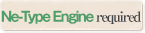
<style>
.page{position:relative;width:145px;height:33px;background:#f0e4d9}
.page>*{position:absolute;margin:0}
.t1{font:14px "GothicMB101Pro-Bold";letter-spacing:-0.1em;color:#4d9e68;scale:0.9 1}
.t2{font:14px "RyuminPro-ExBold";letter-spacing:-0.12em;color:#424648}
</style>
<div class="page">
<p class="t1" style="left:1px;top:10px;width:140px;height:14px">Ne-Type Engine <span class="t2">required</span></p>
</div>
